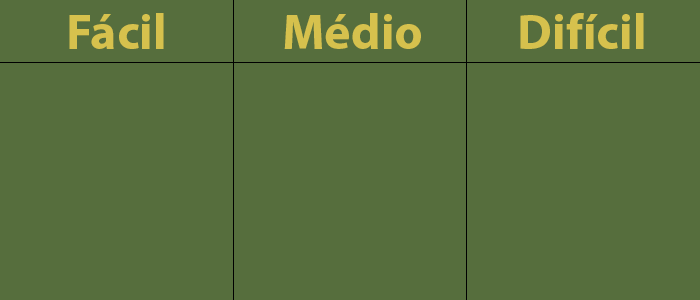
<style>
.page{position:relative;width:700px;height:300px;background:#566e3d}
.page>*{position:absolute;margin:0}
.t1{font:50px "MyriadPro-Bold";color:#d6c14d}
</style>
<div class="page">
<p class="t1" style="left:69px;top:13px;width:95px;height:36px">Fácil</p>
<p class="t1" style="left:284px;top:13px;width:137px;height:36px">Médio</p>
<p class="t1" style="left:520px;top:13px;width:124px;height:36px">Difícil</p>
</div>
